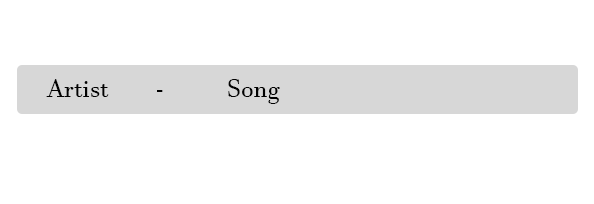
<style>
.page{position:relative;width:594px;height:204px;background:#ffffff}
.page>*{position:absolute;margin:0}
.t1{font:25px "JavaneseText";color:#010101}
</style>
<div class="page">
<p class="t1" style="left:46px;top:79px;width:234px;height:25px">Artist  -  Song</p>
</div>
